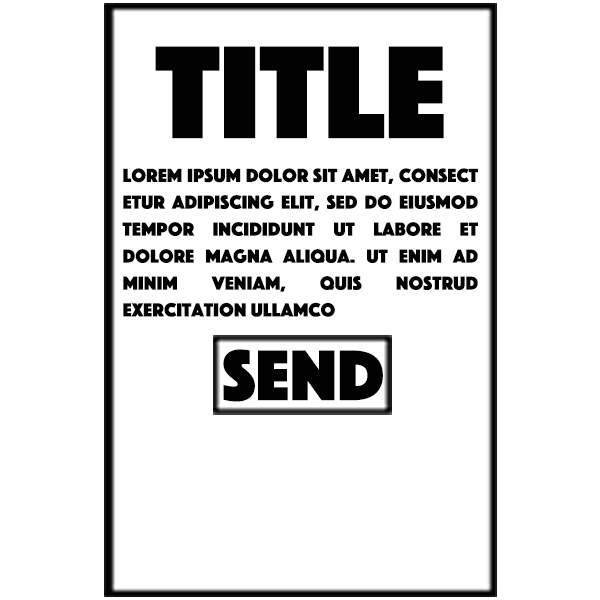
<style>
.page{position:relative;width:600px;height:600px;background:#ffffff}
.page>*{position:absolute;margin:0}
.t1{font:137.3px "Phosphate-Solid";color:#020202}
.t2{font:20px/26.9px "Phosphate-Solid";color:#020202}
.t3{font:74.5px "Phosphate-Solid";color:#020202}
</style>
<div class="page">
<p class="t1" style="left:155px;top:46px;width:289px;height:93px">TITLE</p>
<p class="t2" style="left:122px;top:168px;width:356px;height:149px;text-align:justify">Lorem ipsum dolor sit amet, consect etur adipiscing elit, sed do eiusmod tempor incididunt ut labore et dolore magna aliqua. Ut enim ad minim veniam, quis nostrud exercitation ullamco</p>
<p class="t3" style="left:223px;top:349px;width:160px;height:53px">SEND</p>
</div>
